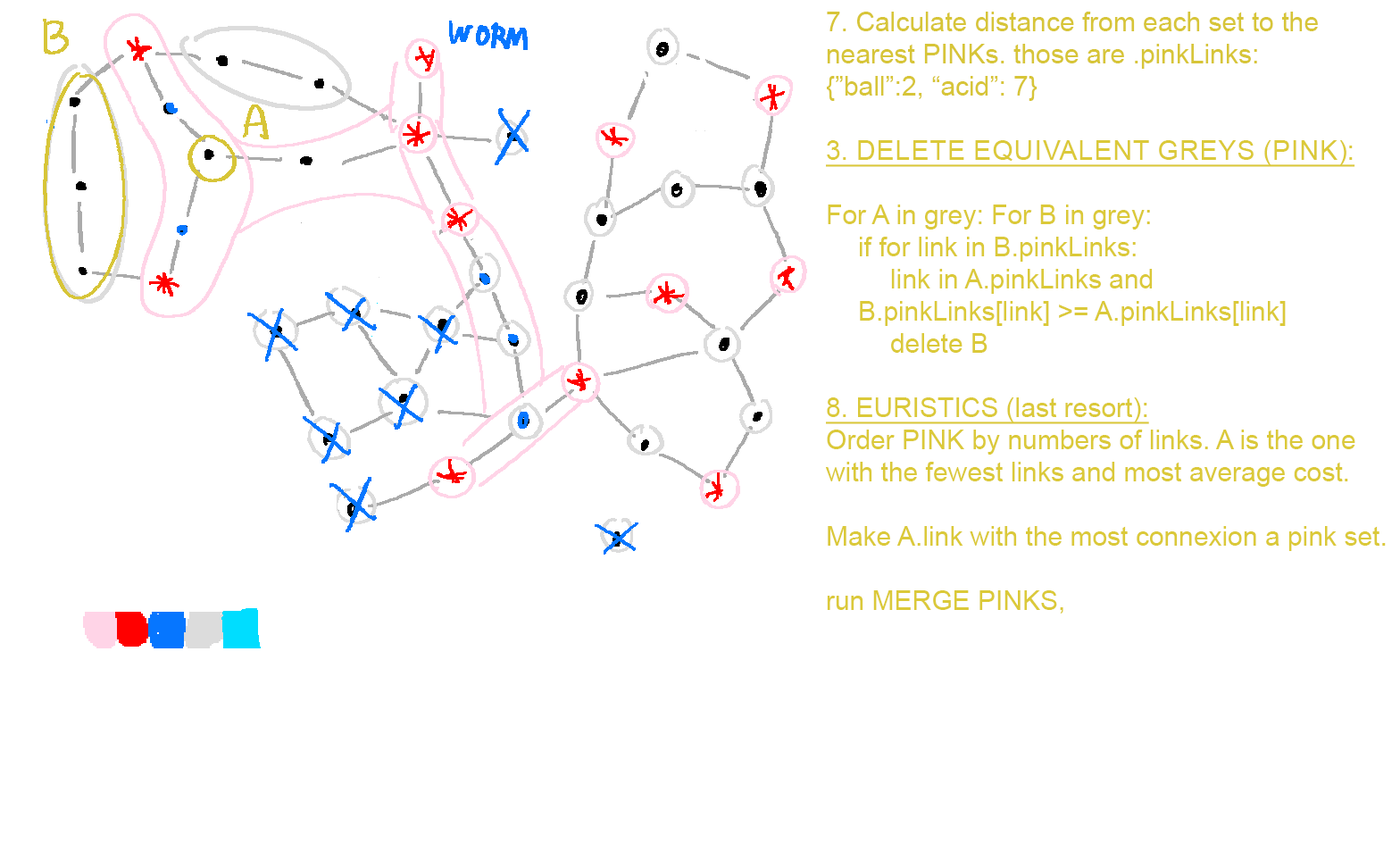
<style>
.page{position:relative;width:1400px;height:852px;background:#ffffff}
.page>*{position:absolute;margin:0}
.t1{font:26.8px "ArialMT";color:#dbc939}
.t2{font:26.8px "ArialMT";color:#d7c538}
.t3{font:26.8px "ArialMT";color:#dbc939;text-transform:uppercase;text-decoration:underline}
.t4{font:26.8px "ArialMT";color:#dbc939;text-decoration:underline}
</style>
<div class="page">
<p class="t1" style="left:826px;top:12px;width:560px;height:601px"><span class="t2">7. Calculate distance from each set to the nearest PINKs. those are .pinkLinks:<br>{”ball”:2, “acid”: 7}<br><br></span><span class="t3">3. delete EQUIVALENT greys (pink):<br></span><br>For A in grey: For B in grey:<br> if for link in B.pinkLinks:<br>  link in A.pinkLinks and <br> B.pinkLinks[link] &gt;= A.pinkLinks[link]<br>  delete B<br><br><span class="t4">8. EURISTICS (last resort):<br></span>Order PINK by numbers of links. A is the one with the fewest links and most average cost. <br><br>Make A.link with the most connexion a pink set.<br><br>run MERGE PINKS,</p>
</div>
